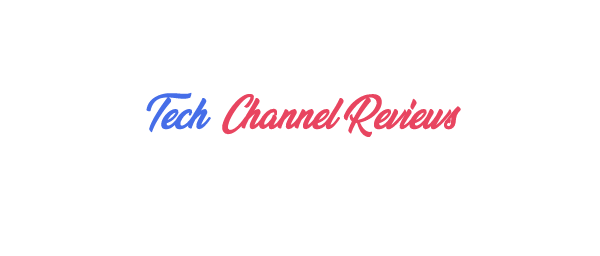
<style>
.page{position:relative;width:600px;height:256px;background:#ffffff}
.page>*{position:absolute;margin:0}
.t1{font:33.3px "VeganStylePersonalUse";color:#e84560}
.t2{font:33.3px "VeganStylePersonalUse";color:#466ee8}
</style>
<div class="page">
<p class="t1" style="left:146px;top:92px;width:315px;height:45px"><span class="t2">Tech  </span>Channel Reviews</p>
</div>
